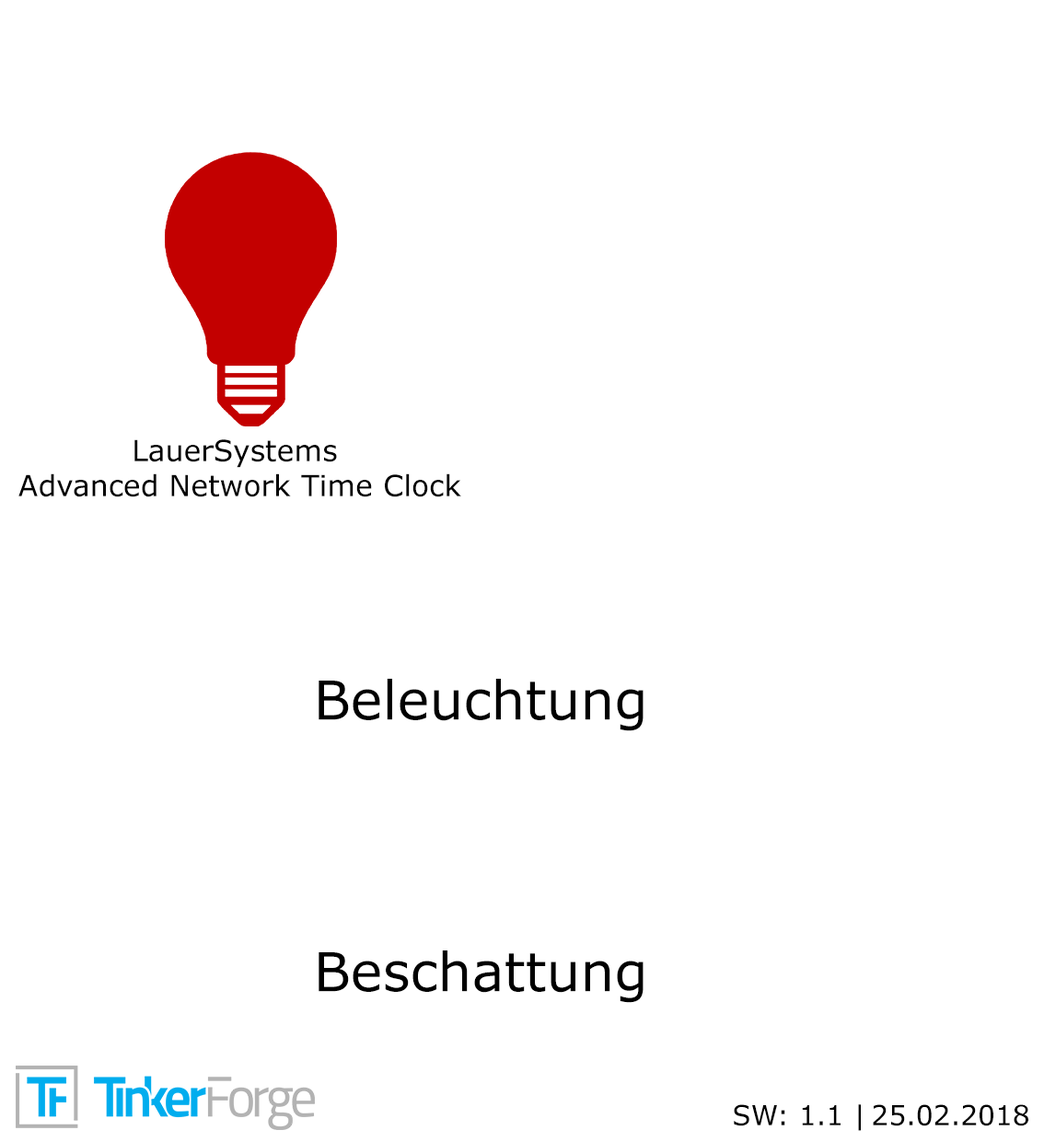
<style>
.page{position:relative;width:1044px;height:1142px;background:#ffffff}
.page>*{position:absolute;margin:0}
.t1{font:29.2px "MSReferenceSansSerif";color:#000000}
.t2{font:53.7px "MSReferenceSansSerif";color:#000000}
.t3{font:27.5px "MSReferenceSansSerif";color:#000000}
</style>
<div class="page">
<p class="t1" style="left:18px;top:439px;width:443px;height:58px;text-align:center">LauerSystems <br>Advanced Network Time Clock</p>
<p class="t2" style="left:319px;top:679px;width:325px;height:52px">Beleuchtung</p>
<p class="t2" style="left:319px;top:950px;width:325px;height:53px">Beschattung</p>
<p class="t3" style="left:734px;top:1104px;width:295px;height:27px">SW: 1.1 | 25.02.2018</p>
</div>
